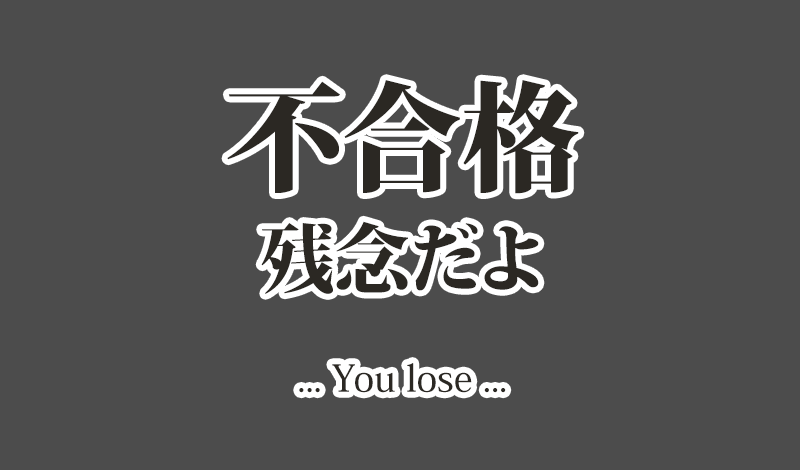
<style>
.page{position:relative;width:800px;height:470px;background:#4c4c4c}
.page>*{position:absolute;margin:0}
.t1{font:37px/105px "KozMinPr6N-Medium";color:#2b2823}
.t2{font:118px/105px "KozMinPr6N-Heavy";color:#2b2823}
.t3{font:75px/105px "KozMinPr6N-Heavy";color:#2b2823}
</style>
<div class="page">
<p class="t1" style="left:227px;top:80px;width:352px;height:313px;text-align:center"><span class="t2">不合格<br></span><span class="t3">残念だよ<br></span>... You lose ...</p>
</div>
